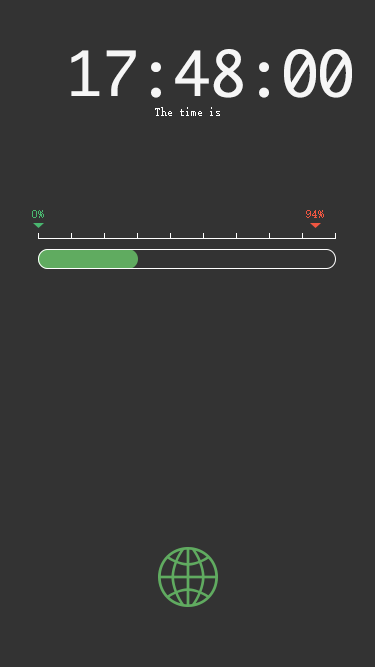
<style>
.page{position:relative;width:375px;height:667px;background:#333333}
.page>*{position:absolute;margin:0}
.t1{font:60px "Monaco";color:#f6f6f6}
.t2{font:12px "SimSun";color:#ffffff}
.t3{font:12px "SimSun";color:#49b66f}
.t4{font:12px "SimSun";color:#f05641}
</style>
<div class="page">
<p class="t1" style="left:71px;top:49px;width:281px;height:49px">17:48:00</p>
<p class="t2" style="left:155px;top:107px;width:65px;height:9px">The time is</p>
<p class="t3" style="left:32px;top:210px;width:12px;height:8px">0%</p>
<p class="t4" style="left:306px;top:210px;width:18px;height:8px">94%</p>
</div>
